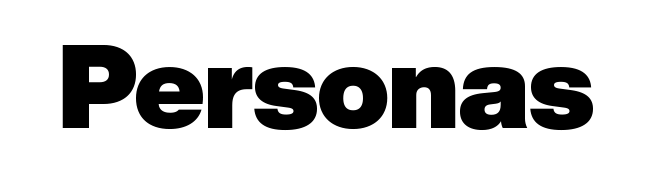
<style>
.page{position:relative;width:655px;height:176px;background:#ffffff}
.page>*{position:absolute;margin:0}
.t1{font:116.7px "HelveticaNowDisplay-XBlk";letter-spacing:-0.01em;color:#000000}
</style>
<div class="page">
<p class="t1" style="left:62px;top:45px;width:531px;height:86px">Personas</p>
</div>
